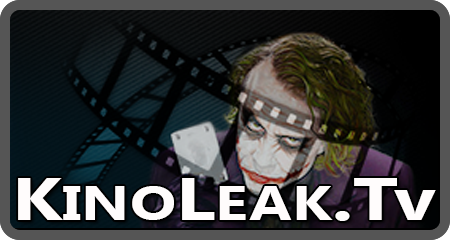
<style>
.page{position:relative;width:450px;height:240px}
.page>*{position:absolute;margin:0}
.t1{font:48px "SegoeUI-Bold";color:#fffcfc;scale:1.28 1}
.t2{font:59.9px "SegoeUI-Bold";color:#fffcfc;scale:1.28 1}
</style>
<div class="page">
<p class="t1" style="left:18px;top:178px;width:418px;height:43px"><span class="t2">K</span>INO<span class="t2">L</span>EAK<span class="t2">.Tv</span></p>
</div>
